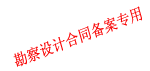
<style>
.page{position:relative;width:150px;height:71px;background:#ffffff}
.page>*{position:absolute;margin:0}
.t1{font:15.4px "NSimSun";color:#f90707;scale:0.89 1}
</style>
<div class="page">
<p class="t1" style="left:13px;top:6px;width:129px;height:61px;rotate:-21deg">勘察设计合同备案专用</p>
</div>
